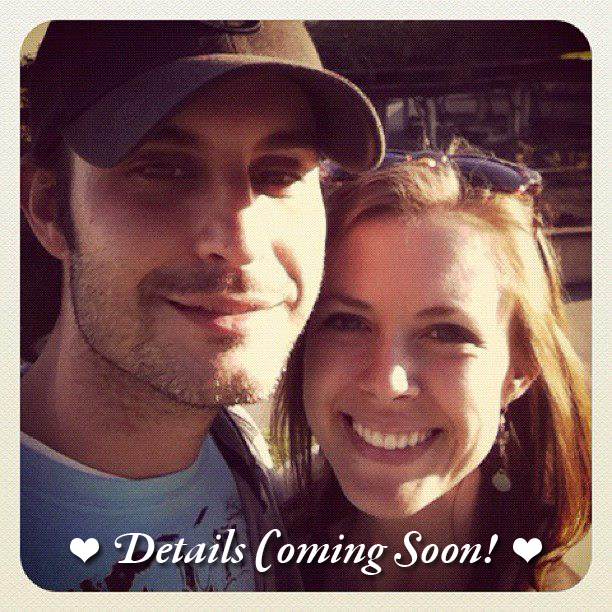
<style>
.page{position:relative;width:612px;height:612px}
.page>*{position:absolute;margin:0}
.t1{font:48px "NK690";color:#ffffff}
</style>
<div class="page">
<p class="t1" style="left:114px;top:529px;width:384px;height:46px">Details Coming Soon!</p>
</div>
